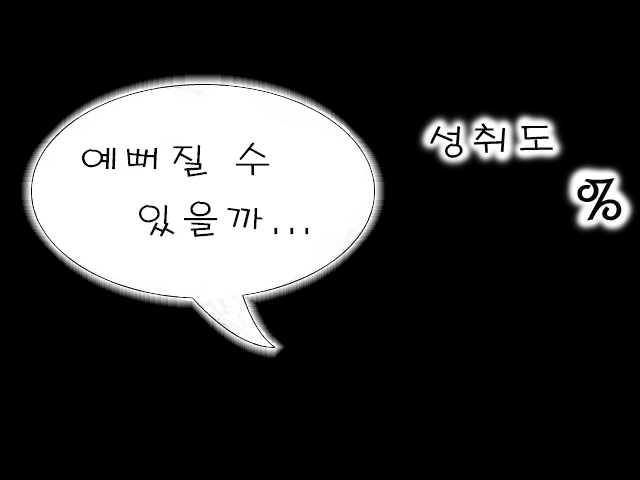
<style>
.page{position:relative;width:640px;height:480px;background:#000000}
.page>*{position:absolute;margin:0}
.t1{font:36px "H2porL";letter-spacing:0.2em;color:#060606;scale:1.08 1}
.t2{font:36px/60px "H2porL";letter-spacing:0.2em;color:#060606;scale:1.08 1}
.t3{font:60px "H2porL";letter-spacing:0.2em;color:#060606;scale:1.08 1}
</style>
<div class="page">
<p class="t1" style="left:430px;top:123px;width:123px;height:35px">성취도</p>
<p class="t2" style="left:81px;top:142px;width:228px;height:95px">예뻐질 수 <br>   있을까...</p>
<p class="t3" style="left:577px;top:178px;width:45px;height:43px">%</p>
</div>
